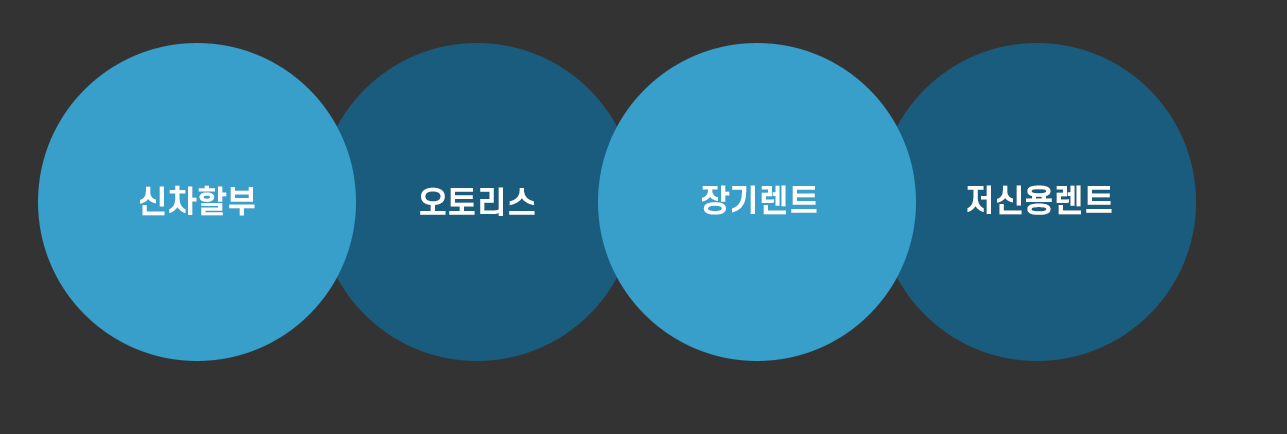
<style>
.page{position:relative;width:1287px;height:434px;background:#333333}
.page>*{position:absolute;margin:0}
.t1{font:31px "S-CoreDream-6Bold";color:#fefefe}
</style>
<div class="page">
<p class="t1" style="left:140px;top:185px;width:115px;height:31px">신차할부</p>
<p class="t1" style="left:702px;top:185px;width:115px;height:30px">장기렌트</p>
<p class="t1" style="left:967px;top:185px;width:145px;height:30px">저신용렌트</p>
<p class="t1" style="left:420px;top:187px;width:115px;height:29px">오토리스</p>
</div>
